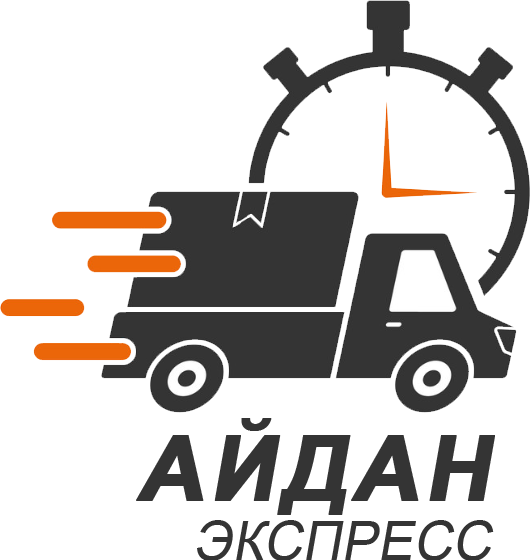
<style>
.page{position:relative;width:530px;height:560px;background:#ffffff}
.page>*{position:absolute;margin:0}
.t1{font:54px/60px "ArialMT";color:#343434;text-transform:uppercase;font-style:italic}
.t2{font:90px/60px "Arial-BoldMT";letter-spacing:0.05em;color:#343434;text-transform:uppercase;font-weight:bold;font-style:italic}
</style>
<div class="page">
<p class="t1" style="left:136px;top:418px;width:359px;height:143px;text-align:right"><span class="t2">Айдан<br></span>экспресс</p>
</div>
